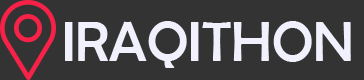
<style>
.page{position:relative;width:364px;height:80px;background:#333333}
.page>*{position:absolute;margin:0}
.t1{font:57px "BerlinSansFB-Reg";color:#f1f1fe}
</style>
<div class="page">
<p class="t1" style="left:65px;top:21px;width:286px;height:47px">IRAQITHON</p>
</div>
